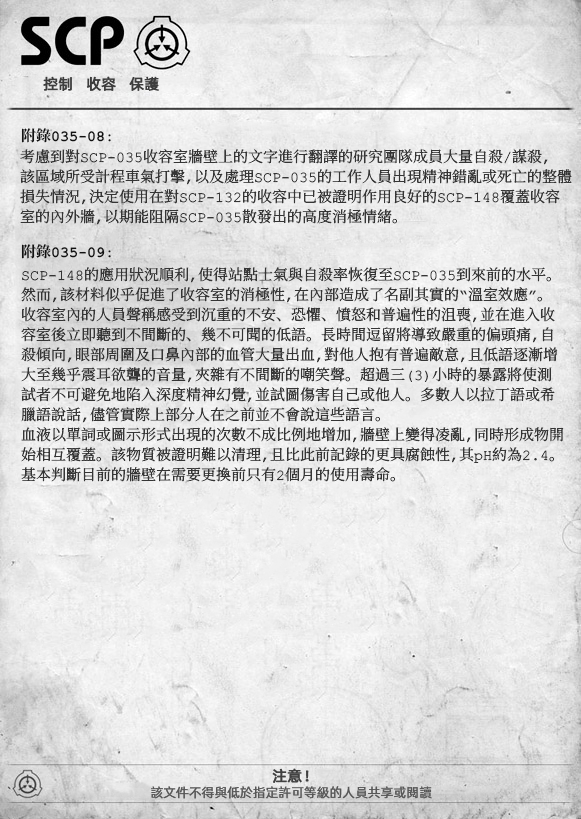
<style>
.page{position:relative;width:581px;height:819px}
.page>*{position:absolute;margin:0}
.t1{font:15px "AlibabaPuHuiTiR";color:#3d3d3d;font-weight:bold}
.t2{font:15px "ContainmentBreach-Bold";color:#121212}
.t3{font:15px/20px "ContainmentBreach-Regular";color:#353535}
.t4{font:15px "AlibabaPuHuiTiR";color:#414141;font-weight:bold}
.t5{font:13px "AlibabaPuHuiTiR";color:#575757}
</style>
<div class="page">
<p class="t1" style="left:43px;top:76px;width:116px;height:15px">控制   收容   保護</p>
<p class="t2" style="left:21px;top:128px;width:90px;height:15px">附錄035-08:</p>
<p class="t3" style="left:20px;top:149px;width:552px;height:76px">考慮到對SCP-035收容室牆壁上的文字進行翻譯的研究團隊成員大量自殺/謀殺，<br>該區域所受計程車氣打擊，以及處理SCP-035的工作人員出現精神錯亂或死亡的整體<br>損失情況，決定使用在對SCP-132的收容中已被證明作用良好的SCP-148覆蓋收容<br>室的內外牆，以期能阻隔SCP-035散發出的高度消極情緒。</p>
<p class="t2" style="left:21px;top:244px;width:90px;height:15px">附錄035-09:</p>
<p class="t3" style="left:21px;top:267px;width:543px;height:215px">SCP-148的應用狀況順利，使得站點士氣與自殺率恢復至SCP-035到來前的水平。<br>然而，該材料似乎促進了收容室的消極性，在內部造成了名副其實的“溫室效應”。<br>收容室內的人員聲稱感受到沉重的不安、恐懼、憤怒和普遍性的沮喪，並在進入收<br>容室後立即聽到不間斷的、幾不可聞的低語。長時間逗留將導致嚴重的偏頭痛，自<br>殺傾向，眼部周圍及口鼻內部的血管大量出血，對他人抱有普遍敵意，且低語逐漸增<br>大至幾乎震耳欲聾的音量，夾雜有不間斷的嘲笑聲。超過三（3）小時的暴露將使測<br>試者不可避免地陷入深度精神幻覺，並試圖傷害自己或他人。多數人以拉丁語或希<br>臘語說話，儘管實際上部分人在之前並不會說這些語言。<br>血液以單詞或圖示形式出現的次數不成比例地增加，牆壁上變得凌亂，同時形成物開<br>始相互覆蓋。該物質被證明難以清理，且比此前記錄的更具腐蝕性，其pH約為2.4。<br>基本判斷目前的牆壁在需要更換前只有2個月的使用壽命。</p>
<p class="t4" style="left:272px;top:768px;width:37px;height:15px">注意！</p>
<p class="t5" style="left:151px;top:786px;width:281px;height:13px">該文件不得與低於指定許可等級的人員共享或閱讀</p>
</div>
